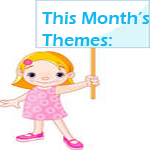
<style>
.page{position:relative;width:150px;height:150px;background:#ffffff}
.page>*{position:absolute;margin:0}
.t1{font:18px "ErasITC-Demi";color:#12b8ef}
</style>
<div class="page">
<p class="t1" style="left:42px;top:12px;width:108px;height:34px">This Month’s <br>Themes:</p>
</div>
